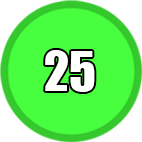
<style>
.page{position:relative;width:142px;height:142px;background:#47ff3e}
.page>*{position:absolute;margin:0}
.t1{font:50px "Impact";color:#ffffff}
</style>
<div class="page">
<p class="t1" style="left:45px;top:50px;width:50px;height:42px">25</p>
</div>
